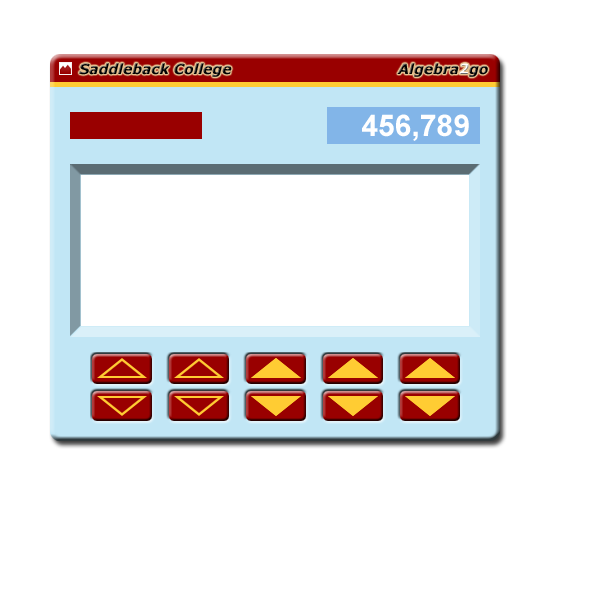
<style>
.page{position:relative;width:600px;height:600px;background:#ffffff}
.page>*{position:absolute;margin:0}
.t1{font:14px "Verdana-BoldItalic";color:#000000}
.t2{font:14px "Verdana-BoldItalic";color:#ffffff}
.t3{font:30px "Arial-BoldMT";color:#ffffff}
</style>
<div class="page">
<p class="t1" style="left:79px;top:63px;width:153px;height:14px">Saddleback College</p>
<p class="t1" style="left:397px;top:63px;width:91px;height:14px">Algebra<span class="t2">2</span>go</p>
<p class="t3" style="left:362px;top:114px;width:107px;height:27px">456,789</p>
</div>
